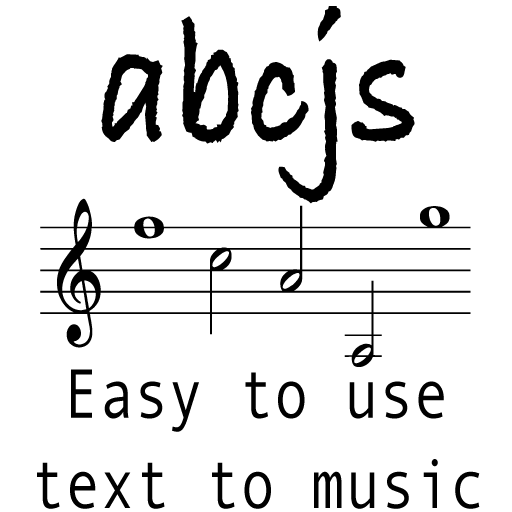
<style>
.page{position:relative;width:512px;height:512px;background:#ffffff}
.page>*{position:absolute;margin:0}
.t1{font:180px "BradleyHandITCTT-Bold";color:#000000;scale:0.83 1}
.t2{font:240px "Lassus";color:#000000;scale:0.83 1}
.t3{font:70px "AndaleMono";color:#000000;scale:0.83 1}
</style>
<div class="page">
<p class="t1" style="left:101px;top:6px;width:314px;height:198px">abcjs</p>
<p class="t2" style="left:40px;top:198px;width:431px;height:169px">`abcjs</p>
<p class="t3" style="left:71px;top:369px;width:373px;height:63px">Easy to use</p>
<p class="t3" style="left:37px;top:459px;width:443px;height:50px">text to music</p>
</div>
